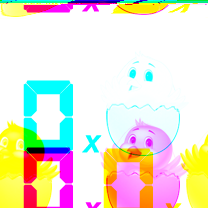
<style>
.page{position:relative;width:208px;height:208px;background:#ffffff}
.page>*{position:absolute;margin:0}
.t1{font:100px "QuartzMS";font-weight:bold}
.t2{font:36px "Raavi";font-weight:bold;font-style:italic}
</style>
<div class="page">
<p class="t1" style="left:23px;top:77px;width:79px;height:74px">0<span class="t2">x</span></p>
</div>
